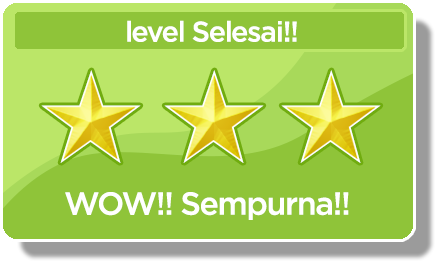
<style>
.page{position:relative;width:435px;height:261px;background:#8fc439}
.page>*{position:absolute;margin:0}
.t1{font:28.4px "iCielGotham-Medium";letter-spacing:-0.04em;color:#ffffff}
.t2{font:31.8px "iCielGotham-Medium";letter-spacing:-0.04em;color:#ffffff}
</style>
<div class="page">
<p class="t1" style="left:127px;top:20px;width:170px;height:22px">level Selesai!!</p>
<p class="t2" style="left:65px;top:192px;width:284px;height:28px">WOW!! Sempurna!!</p>
</div>
